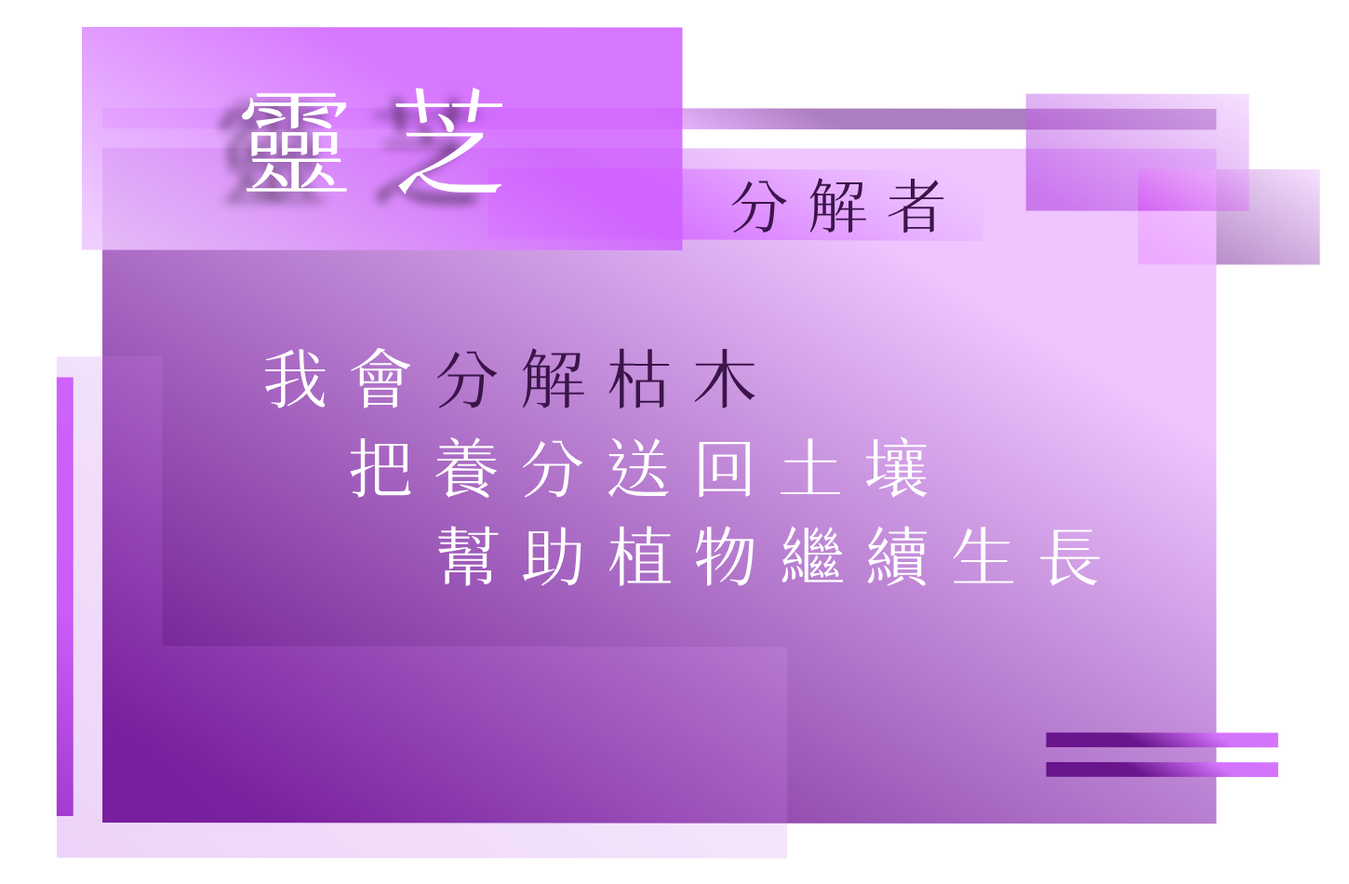
<style>
.page{position:relative;width:1349px;height:884px;background:#ffffff}
.page>*{position:absolute;margin:0}
.t1{font:116.3px "SweiSpringCJKtc-Regular";letter-spacing:0.32em;color:#ffffff;text-transform:uppercase}
.t2{font:59.5px "SweiSpringCJKtc-Regular";letter-spacing:0.32em;color:#3b154a;text-transform:uppercase}
.t3{font:65.1px "SweiSpringCJKtc-Regular";letter-spacing:0.32em;color:#3b154a;text-transform:uppercase}
.t4{font:65.1px "SweiSpringCJKtc-Regular";letter-spacing:0.32em;color:#ffffff;text-transform:uppercase}
</style>
<div class="page">
<p class="t1" style="left:241px;top:87px;width:261px;height:107px">靈芝</p>
<p class="t2" style="left:731px;top:178px;width:213px;height:55px">分解者</p>
<p class="t3" style="left:264px;top:347px;width:491px;height:61px"><span class="t4">我會</span>分解枯木</p>
<p class="t4" style="left:350px;top:436px;width:578px;height:62px">把養分送回土壤</p>
<p class="t4" style="left:438px;top:526px;width:662px;height:61px">幫助植物繼續生長</p>
</div>
